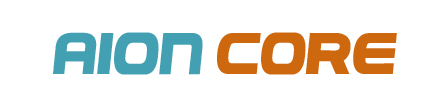
<style>
.page{position:relative;width:440px;height:100px;background:#ffffff}
.page>*{position:absolute;margin:0}
.t1{font:60px "!-PEPSI-!";letter-spacing:0.025em;color:#43a0b3;text-transform:uppercase}
.t2{font:60px "!-PEPSI-!";letter-spacing:0.025em;color:#cd680e;text-transform:uppercase}
</style>
<div class="page">
<p class="t1" style="left:53px;top:32px;width:344px;height:43px">AION <span class="t2">Core</span></p>
</div>
